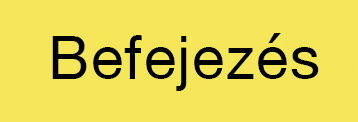
<style>
.page{position:relative;width:358px;height:122px;background:#f5e759}
.page>*{position:absolute;margin:0}
.t1{font:60px "HelveticaNeue";letter-spacing:0.025em;color:#000000}
</style>
<div class="page">
<p class="t1" style="left:52px;top:33px;width:267px;height:58px">Befejezés</p>
</div>
